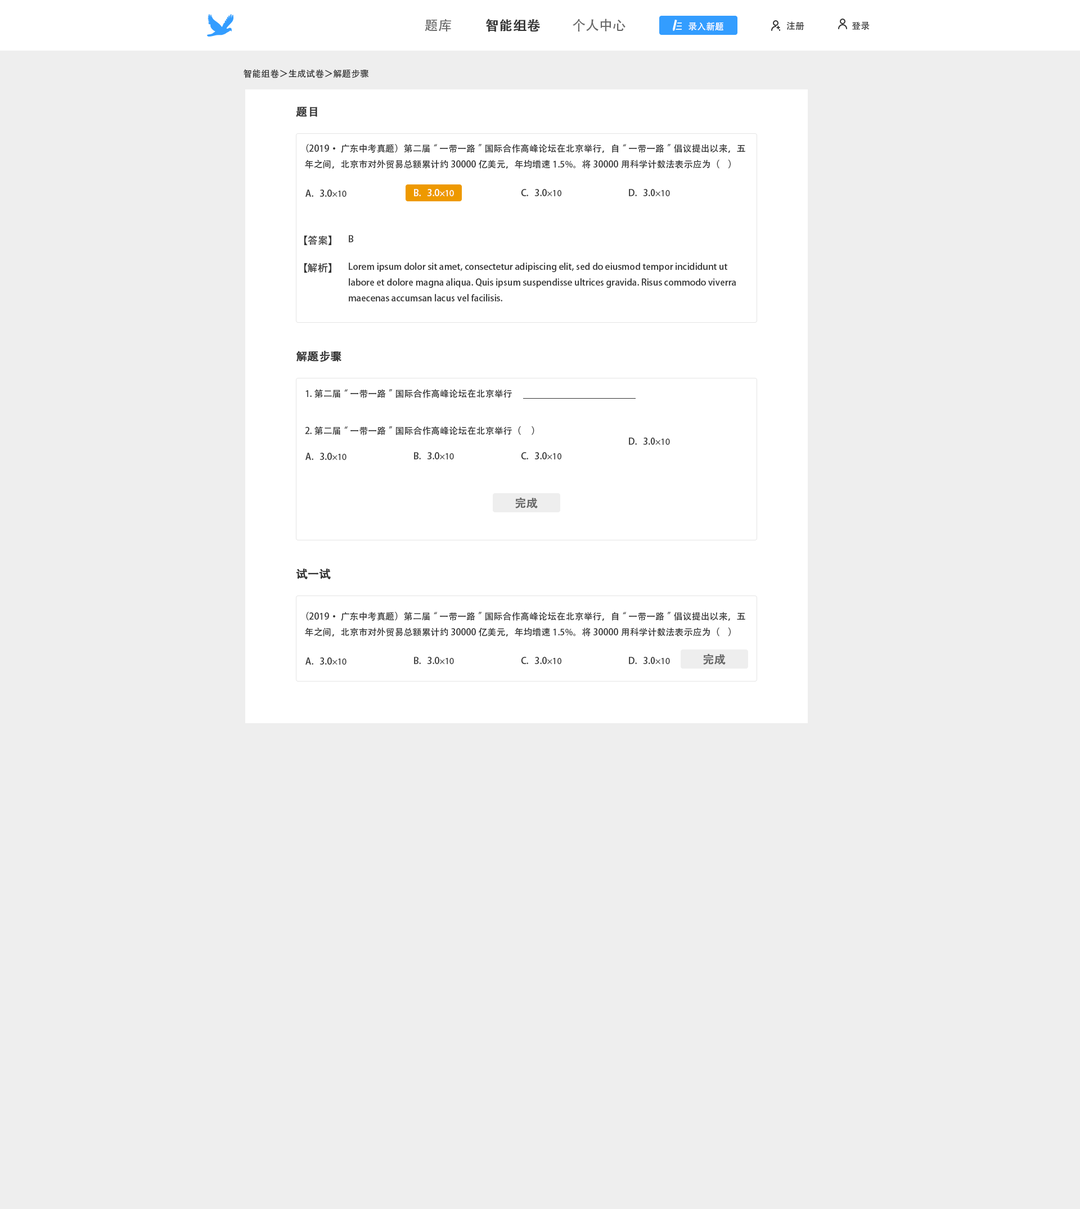
<style>
.page{position:relative;width:1080px;height:1209px;background:#eeeeee}
.page>*{position:absolute;margin:0}
.t1{font:13.5px "AdobeHeitiStd-Regular";color:#666666}
.t2{font:13.5px "AdobeHeitiStd-Regular";color:#333333;font-weight:bold}
.t3{font:9px "AdobeHeitiStd-Regular";color:#ffffff}
.t4{font:9px "AdobeHeitiStd-Regular";color:#333333}
.t5{font:11.2px "AdobeHeitiStd-Regular";color:#333333;font-weight:bold}
.t6{font:9px "MyriadPro-Regular";color:#333333}
.t7{font:9px "MyriadPro-Regular";color:#ffffff}
.t8{font:10.1px "AdobeHeitiStd-Regular";color:#333333}
.t9{font:11.2px "AdobeHeitiStd-Regular";color:#666666;font-weight:bold}
</style>
<div class="page">
<p class="t1" style="left:425px;top:19px;width:26px;height:13px">题库</p>
<p class="t2" style="left:486px;top:19px;width:54px;height:13px">智能组卷</p>
<p class="t1" style="left:573px;top:19px;width:53px;height:13px">个人中心</p>
<p class="t3" style="left:688px;top:22px;width:35px;height:9px">录入新题</p>
<p class="t4" style="left:786px;top:21px;width:18px;height:9px">注册</p>
<p class="t4" style="left:852px;top:21px;width:18px;height:9px">登录</p>
<p class="t4" style="left:244px;top:69px;width:125px;height:9px">智能组卷＞生成试卷＞解题步骤</p>
<p class="t5" style="left:296px;top:106px;width:21px;height:11px">题目</p>
<p class="t4" style="left:305px;top:144px;width:440px;height:25px">（2019·广东中考真题）第二届“一带一路”国际合作高峰论坛在北京举行，自“一带一路”倡议提出以来，五年之间，北京市对外贸易总额累计约30000亿美元，年均增速1.5%。将30000用科学计数法表示应为（    ）</p>
<p class="t4" style="left:305px;top:190px;width:41px;height:7px">A.   3.0<span class="t6">×10</span></p>
<p class="t3" style="left:414px;top:189px;width:40px;height:7px">B.   3.0<span class="t7">×10</span></p>
<p class="t4" style="left:521px;top:189px;width:40px;height:7px">C.   3.0<span class="t6">×10</span></p>
<p class="t4" style="left:629px;top:189px;width:41px;height:7px">D.   3.0<span class="t6">×10</span></p>
<p class="t8" style="left:304px;top:235px;width:27px;height:10px">【答案】</p>
<p class="t4" style="left:349px;top:235px;width:5px;height:7px">B</p>
<p class="t8" style="left:304px;top:263px;width:27px;height:10px">【解析】</p>
<p class="t4" style="left:349px;top:262px;width:387px;height:40px">Lorem ipsum dolor sit amet, consectetur adipiscing elit, sed do eiusmod tempor incididunt ut labore et dolore magna aliqua. Quis ipsum suspendisse ultrices gravida. Risus commodo viverra maecenas accumsan lacus vel facilisis.</p>
<p class="t5" style="left:296px;top:350px;width:45px;height:12px">解题步骤</p>
<p class="t4" style="left:305px;top:389px;width:207px;height:9px">1.第二届“一带一路”国际合作高峰论坛在北京举行</p>
<p class="t4" style="left:305px;top:426px;width:229px;height:9px">2.第二届“一带一路”国际合作高峰论坛在北京举行（     ）</p>
<p class="t4" style="left:629px;top:438px;width:41px;height:7px">D.   3.0<span class="t6">×10</span></p>
<p class="t4" style="left:305px;top:453px;width:41px;height:7px">A.   3.0<span class="t6">×10</span></p>
<p class="t4" style="left:414px;top:452px;width:40px;height:8px">B.   3.0<span class="t6">×10</span></p>
<p class="t4" style="left:521px;top:452px;width:40px;height:8px">C.   3.0<span class="t6">×10</span></p>
<p class="t9" style="left:515px;top:497px;width:23px;height:11px">完成</p>
<p class="t5" style="left:296px;top:569px;width:35px;height:10px">试一试</p>
<p class="t4" style="left:305px;top:612px;width:440px;height:25px">（2019·广东中考真题）第二届“一带一路”国际合作高峰论坛在北京举行，自“一带一路”倡议提出以来，五年之间，北京市对外贸易总额累计约30000亿美元，年均增速1.5%。将30000用科学计数法表示应为（    ）</p>
<p class="t9" style="left:703px;top:654px;width:23px;height:11px">完成</p>
<p class="t4" style="left:305px;top:658px;width:41px;height:7px">A.   3.0<span class="t6">×10</span></p>
<p class="t4" style="left:414px;top:657px;width:40px;height:7px">B.   3.0<span class="t6">×10</span></p>
<p class="t4" style="left:521px;top:657px;width:40px;height:7px">C.   3.0<span class="t6">×10</span></p>
<p class="t4" style="left:629px;top:657px;width:41px;height:7px">D.   3.0<span class="t6">×10</span></p>
</div>
